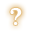
<style>
.page{position:relative;width:32px;height:32px;background:#ffffff}
.page>*{position:absolute;margin:0}
.t1{font:22px "Superclarendon-Regular";color:#ffffff}
</style>
<div class="page">
<p class="t1" style="left:10px;top:8px;width:12px;height:17px">?</p>
</div>
